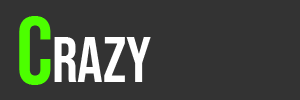
<style>
.page{position:relative;width:300px;height:100px;background:#333333}
.page>*{position:absolute;margin:0}
.t1{font:96.5px "BebasNeue-Regular";letter-spacing:-0.025em;color:#4cff00}
.t2{font:64px "BebasNeue-Regular";letter-spacing:-0.005em;color:#ffffff}
</style>
<div class="page">
<p class="t1" style="left:19px;top:16px;width:32px;height:69px">C</p>
<p class="t2" style="left:54px;top:37px;width:97px;height:45px">razy</p>
</div>
